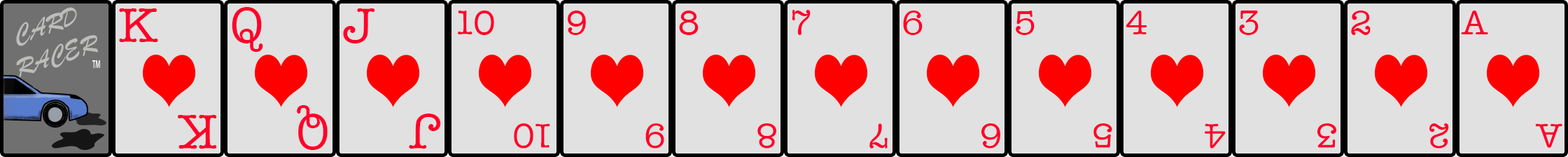
<style>
.page{position:relative;width:1568px;height:157px;background:#e1e1e1}
.page>*{position:absolute;margin:0}
.t1{font:26.6px "BrushScriptMT";color:#bdbdbb}
.t2{font:50.4px "AmericanTypewriter";color:#ff002a}
.t3{font:35px "AmericanTypewriter";color:#ff002a}
</style>
<div class="page">
<p class="t1" style="left:16px;top:7px;width:82px;height:70px;text-align:center;rotate:-18deg">CARD<br>RACER</p>
<p class="t2" style="left:119px;top:8px;width:39px;height:34px">K</p>
<p class="t2" style="left:232px;top:7px;width:31px;height:45px">Q</p>
<p class="t2" style="left:343px;top:8px;width:32px;height:35px">J</p>
<p class="t3" style="left:458px;top:10px;width:36px;height:25px">10</p>
<p class="t3" style="left:568px;top:10px;width:18px;height:25px">9</p>
<p class="t3" style="left:679px;top:10px;width:20px;height:25px">8</p>
<p class="t3" style="left:792px;top:10px;width:19px;height:25px">7</p>
<p class="t3" style="left:903px;top:10px;width:20px;height:25px">6</p>
<p class="t3" style="left:1016px;top:10px;width:19px;height:25px">5</p>
<p class="t3" style="left:1126px;top:10px;width:21px;height:24px">4</p>
<p class="t3" style="left:1239px;top:10px;width:20px;height:25px">3</p>
<p class="t3" style="left:1351px;top:10px;width:20px;height:25px">2</p>
<p class="t3" style="left:1461px;top:10px;width:27px;height:24px">A</p>
<p class="t2" style="left:297px;top:105px;width:31px;height:45px;rotate:-180deg">Q</p>
<p class="t2" style="left:409px;top:113px;width:32px;height:35px;rotate:-180deg">J</p>
<p class="t2" style="left:178px;top:115px;width:39px;height:33px;rotate:-180deg">K</p>
<p class="t3" style="left:514px;top:123px;width:36px;height:25px;rotate:-180deg">10</p>
<p class="t3" style="left:645px;top:123px;width:19px;height:25px;rotate:-180deg">9</p>
<p class="t3" style="left:757px;top:123px;width:19px;height:25px;rotate:-180deg">8</p>
<p class="t3" style="left:869px;top:123px;width:19px;height:25px;rotate:-180deg">7</p>
<p class="t3" style="left:981px;top:123px;width:19px;height:25px;rotate:-180deg">6</p>
<p class="t3" style="left:1093px;top:123px;width:19px;height:25px;rotate:-180deg">5</p>
<p class="t3" style="left:1205px;top:123px;width:21px;height:25px;rotate:-180deg">4</p>
<p class="t3" style="left:1317px;top:123px;width:19px;height:25px;rotate:-180deg">3</p>
<p class="t3" style="left:1429px;top:123px;width:20px;height:25px;rotate:-180deg">2</p>
<p class="t3" style="left:1535px;top:123px;width:27px;height:25px;rotate:-180deg">A</p>
</div>
